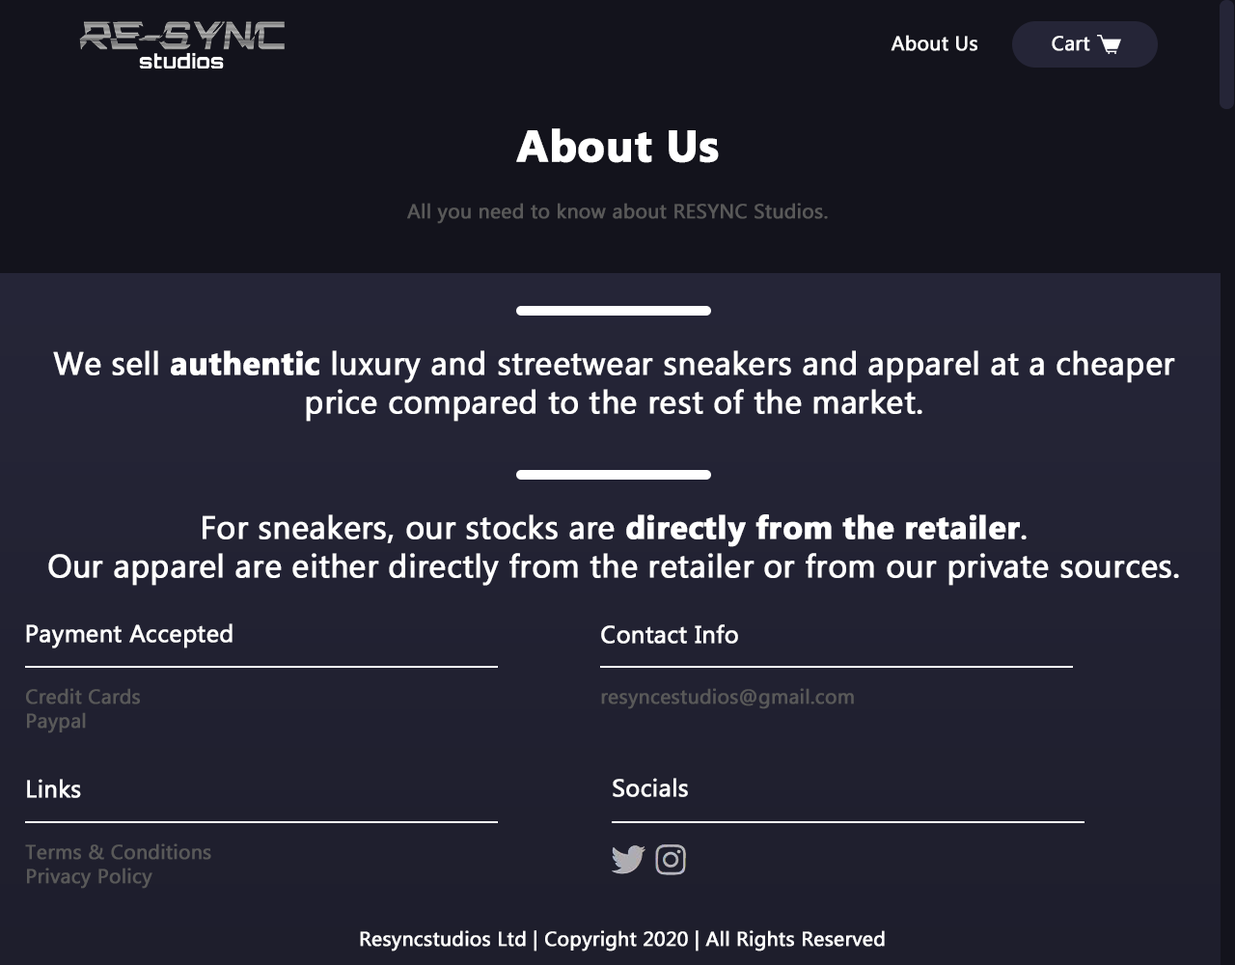
<style>
.page{position:relative;width:1235px;height:965px;background:#13131c}
.page>*{position:absolute;margin:0}
.t1{font:20.1px "MicrosoftTaiLe";color:#ffffff;font-weight:bold}
.t2{font:44.2px "MicrosoftTaiLe-Bold";color:#ffffff;font-weight:bold}
.t3{font:20.1px "MicrosoftTaiLe";color:#595959;font-weight:bold}
.t4{font:32.2px "MicrosoftTaiLe";color:#ffffff;font-weight:bold}
.t5{font:32.2px "MicrosoftTaiLe-Bold";color:#ffffff;font-weight:bold}
.t6{font:24.1px "MicrosoftTaiLe";color:#ffffff;font-weight:bold}
</style>
<div class="page">
<p class="t1" style="left:891px;top:35px;width:87px;height:16px">About Us</p>
<p class="t1" style="left:1052px;top:36px;width:39px;height:15px">Cart</p>
<p class="t2" style="left:516px;top:128px;width:203px;height:35px">About Us</p>
<p class="t3" style="left:407px;top:203px;width:421px;height:21px">All you need to know about RESYNC Studios.</p>
<p class="t4" style="left:53px;top:350px;width:1123px;height:72px;text-align:center">We sell <span class="t5">authentic</span> luxury and streetwear sneakers and apparel at a cheaper price compared to the rest of the market.</p>
<p class="t4" style="left:48px;top:514px;width:1131px;height:72px;text-align:center">For sneakers, our stocks are <span class="t5">directly from the retailer</span>.<br>Our apparel are either directly from the retailer or from our private sources.</p>
<p class="t6" style="left:26px;top:624px;width:207px;height:25px">Payment Accepted</p>
<p class="t6" style="left:601px;top:624px;width:137px;height:20px">Contact Info</p>
<p class="t3" style="left:26px;top:688px;width:114px;height:46px">Credit Cards<br>Paypal</p>
<p class="t3" style="left:601px;top:688px;width:253px;height:21px">resyncestudios@gmail.com</p>
<p class="t6" style="left:27px;top:779px;width:54px;height:19px">Links</p>
<p class="t6" style="left:613px;top:778px;width:75px;height:19px">Socials</p>
<p class="t3" style="left:25px;top:844px;width:186px;height:45px">Terms &amp; Conditions<br>Privacy Policy</p>
<p class="t1" style="left:360px;top:930px;width:525px;height:22px">Resyncstudios Ltd | Copyright 2020 | All Rights Reserved</p>
</div>
